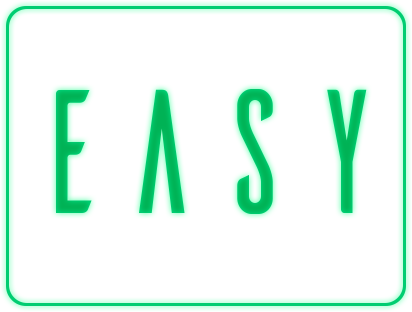
<style>
.page{position:relative;width:412px;height:312px;background:#ffffff}
.page>*{position:absolute;margin:0}
.t1{font:176px "Ailerons-Regular";color:#00b255;scale:0.91 1}
</style>
<div class="page">
<p class="t1" style="left:56px;top:89px;width:311px;height:125px">easy</p>
</div>
